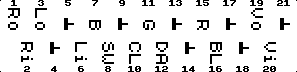
<style>
.page{position:relative;width:297px;height:72px;background:#ffffff}
.page>*{position:absolute;margin:0}
.t1{font:16px/27px "ZX 6x8";color:#000000}
</style>
<div class="page">
<p class="t1" style="left:8px;top:8px;width:255px;height:22px;rotate:90deg">Vo<br><br> R<br><br> G<br><br> B<br><br>Lo<br>Ro</p>
<p class="t1" style="left:21px;top:42px;width:255px;height:22px;rotate:90deg">Vi<br><br>BL<br><br>DA<br>CL<br>SW<br>Li<br><br>Ri</p>
</div>
